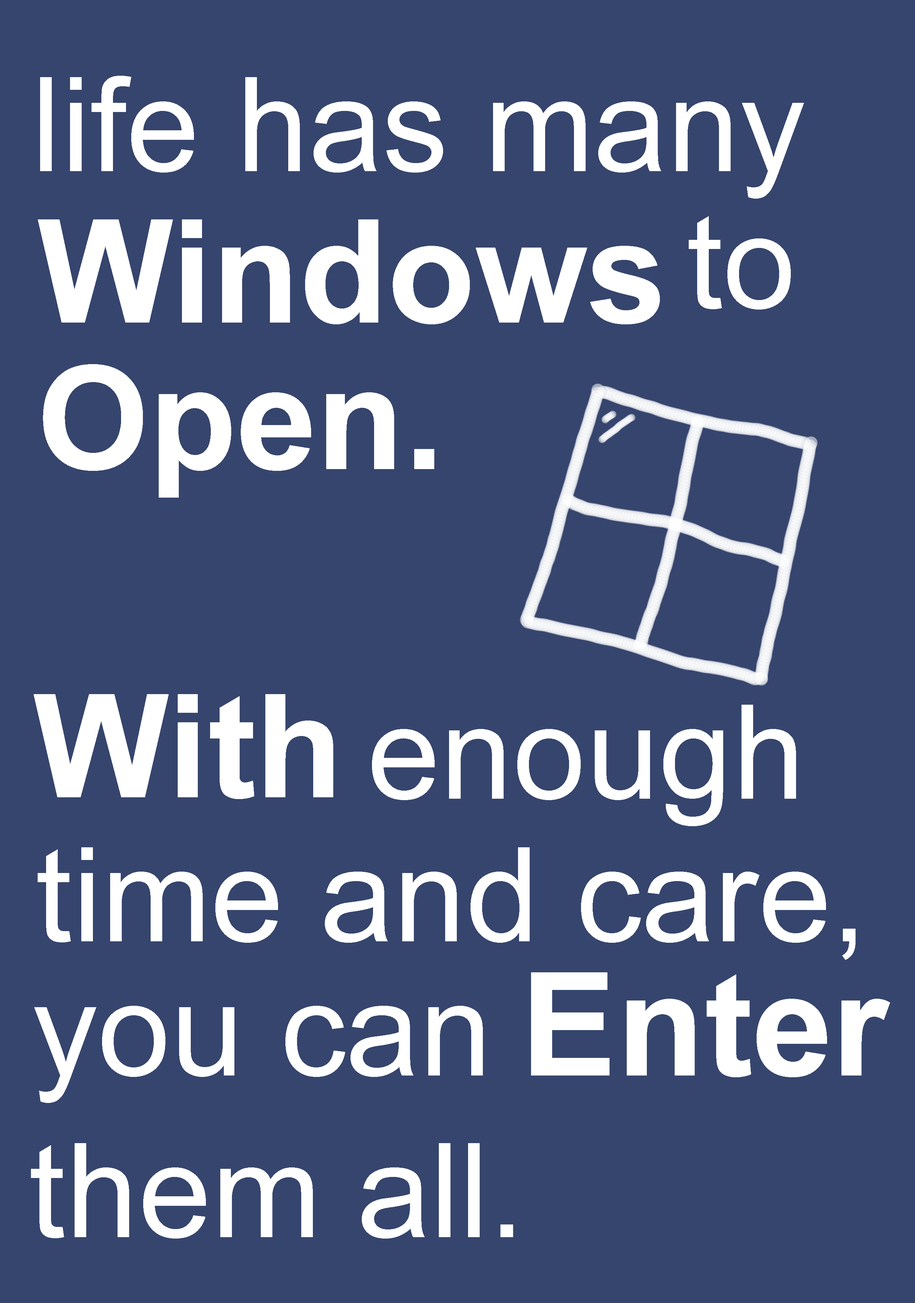
<style>
.page{position:relative;width:915px;height:1303px;background:#36456d}
.page>*{position:absolute;margin:0}
.t1{font:131.4px "ArialMT";color:#ffffff}
.t2{font:143.7px "Arial-BoldMT";color:#ffffff}
</style>
<div class="page">
<p class="t1" style="left:40px;top:76px;width:764px;height:123px">life has many</p>
<p class="t2" style="left:38px;top:219px;width:622px;height:105px">Windows</p>
<p class="t1" style="left:689px;top:216px;width:102px;height:93px">to</p>
<p class="t2" style="left:43px;top:364px;width:391px;height:133px">Open.</p>
<p class="t2" style="left:33px;top:694px;width:300px;height:105px">With</p>
<p class="t1" style="left:372px;top:704px;width:424px;height:122px">enough</p>
<p class="t1" style="left:38px;top:847px;width:818px;height:113px">time and care,</p>
<p class="t2" style="left:531px;top:972px;width:359px;height:105px">Enter</p>
<p class="t1" style="left:34px;top:1006px;width:449px;height:97px">you can</p>
<p class="t1" style="left:31px;top:1143px;width:482px;height:95px">them all.</p>
</div>
